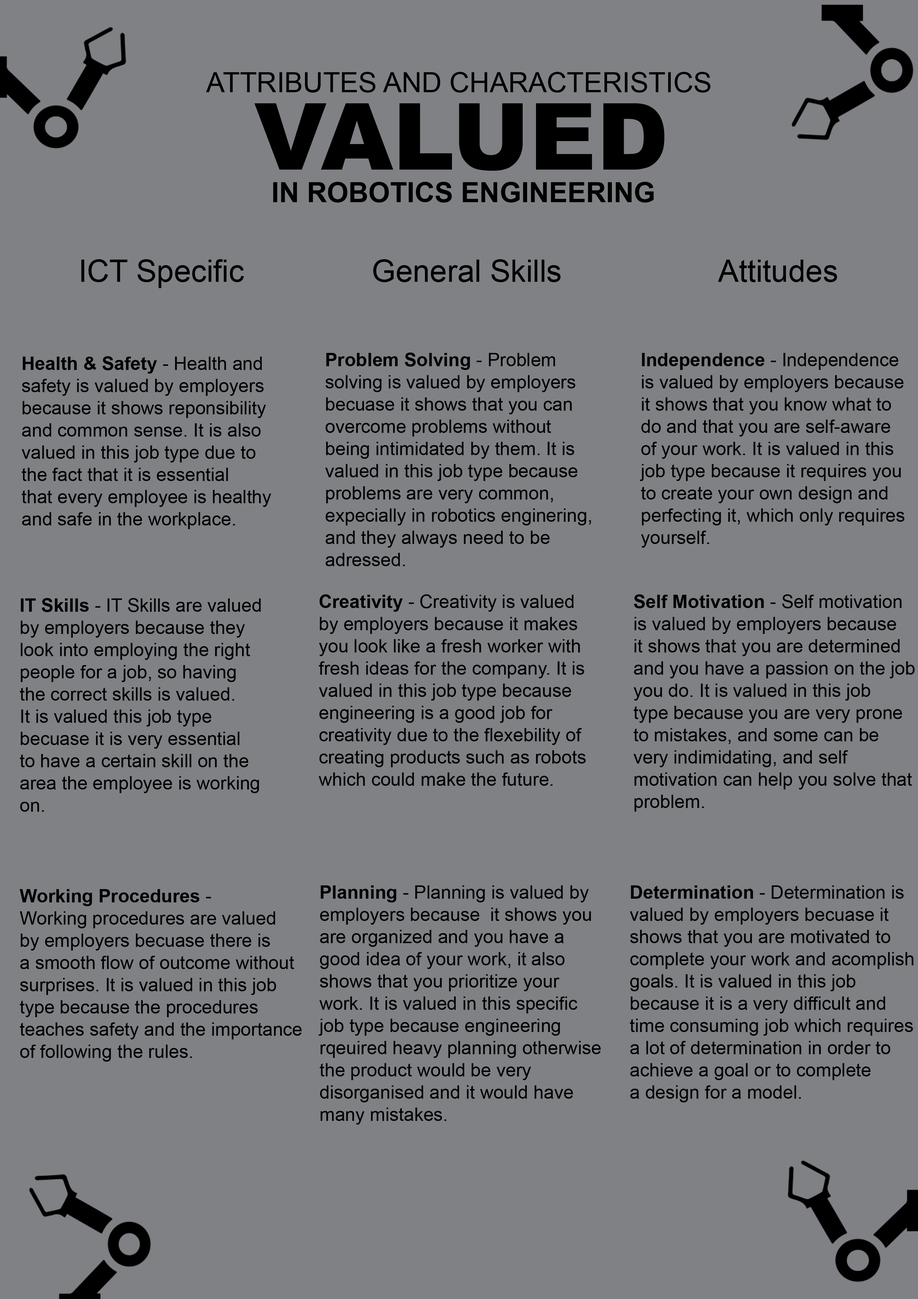
<style>
.page{position:relative;width:918px;height:1299px;background:#808185}
.page>*{position:absolute;margin:0}
.t1{font:27.8px "ArialMT";color:#000000}
.t2{font:92.6px "Arial-Black";color:#000000}
.t3{font:27.8px "Arial-BoldMT";color:#000000}
.t4{font:30.9px "ArialMT";color:#000000}
.t5{font:18.5px "ArialMT";color:#000000}
.t6{font:18.5px "Arial-BoldMT";color:#000000}
</style>
<div class="page">
<p class="t1" style="left:206px;top:72px;width:505px;height:21px">ATTRIBUTES AND CHARACTERISTICS</p>
<p class="t2" style="left:254px;top:103px;width:411px;height:68px">VALUED</p>
<p class="t3" style="left:273px;top:182px;width:381px;height:21px">IN ROBOTICS ENGINEERING</p>
<p class="t4" style="left:81px;top:259px;width:756px;height:29px">ICT Specific          General Skills            Attitudes</p>
<p class="t5" style="left:325px;top:352px;width:266px;height:214px"><span class="t6">Problem Solving</span> - Problem <br>solving is valued by employers <br>becuase it shows that you can<br>overcome problems without <br>being intimidated by them. It is<br>valued in this job type because <br>problems are very common, <br>expecially in robotics enginering,<br>and they always need to be <br>adressed.</p>
<p class="t5" style="left:640px;top:353px;width:265px;height:195px"><span class="t6">Independence</span> - Independence<br>is valued by employers because<br>it shows that you know what to<br>do and that you are self-aware <br>of your work. It is valued in this<br>job type because it requires you<br>to create your own design and<br>perfecting it, which only requires<br>yourself.</p>
<p class="t5" style="left:21px;top:356px;width:250px;height:173px"><span class="t6">Health &amp; Safety</span> - Health and <br>safety is valued by employers<br>because it shows reponsibility <br>and common sense. It is also<br>valued in this job type due to <br>the fact that it is essential <br>that every employee is healthy <br>and safe in the workplace.</p>
<p class="t5" style="left:20px;top:598px;width:241px;height:214px"><span class="t6">IT Skills</span> - IT Skills are valued <br>by employers because they<br>look into employing the right<br>people for a job, so having<br>the correct skills is valued. <br>It is valued this job type <br>becuase it is very essential<br>to have a certain skill on the <br>area the employee is working <br>on.</p>
<p class="t5" style="left:319px;top:594px;width:267px;height:192px"><span class="t6">Creativity</span> - Creativity is valued<br>by employers because it makes<br>you look like a fresh worker with <br>fresh ideas for the company. It is<br>valued in this job type because<br>engineering is a good job for<br>creativity due to the flexebility of<br>creating products such as robots<br>which could make the future.</p>
<p class="t5" style="left:633px;top:594px;width:282px;height:218px"><span class="t6">Self Motivation</span> - Self motivation<br>is valued by employers because <br>it shows that you are determined<br>and you have a passion on the job<br>you do. It is valued in this job <br>type because you are very prone<br>to mistakes, and some can be<br>very indimidating, and self <br>motivation can help you solve that<br>problem.</p>
<p class="t5" style="left:20px;top:889px;width:282px;height:172px"><span class="t6">Working Procedures</span> - <br>Working procedures are valued<br>by employers becuase there is <br>a smooth flow of outcome without<br>surprises. It is valued in this job <br>type because the procedures<br>teaches safety and the importance<br>of following the rules.</p>
<p class="t5" style="left:318px;top:885px;width:283px;height:239px"><span class="t6">Planning</span> - Planning is valued by<br>employers because  it shows you <br>are organized and you have a <br>good idea of your work, it also <br>shows that you prioritize your <br>work. It is valued in this specific <br>job type because engineering<br>rqeuired heavy planning otherwise<br>the product would be very <br>disorganised and it would have <br>many mistakes.</p>
<p class="t5" style="left:630px;top:885px;width:284px;height:217px"><span class="t6">Determination</span> - Determination is<br>valued by employers becuase it<br>shows that you are motivated to<br>complete your work and acomplish<br>goals. It is valued in this job <br>because it is a very difficult and <br>time consuming job which requires<br>a lot of determination in order to <br>achieve a goal or to complete<br>a design for a model.</p>
</div>
